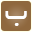
<style>
.page{position:relative;width:33px;height:33px;background:#8f683e}
.page>*{position:absolute;margin:0}
.t1{font:29.5px "BYekan";color:#ffffff}
</style>
<div class="page">
<p class="t1" style="left:5px;top:11px;width:22px;height:15px">ب</p>
</div>
